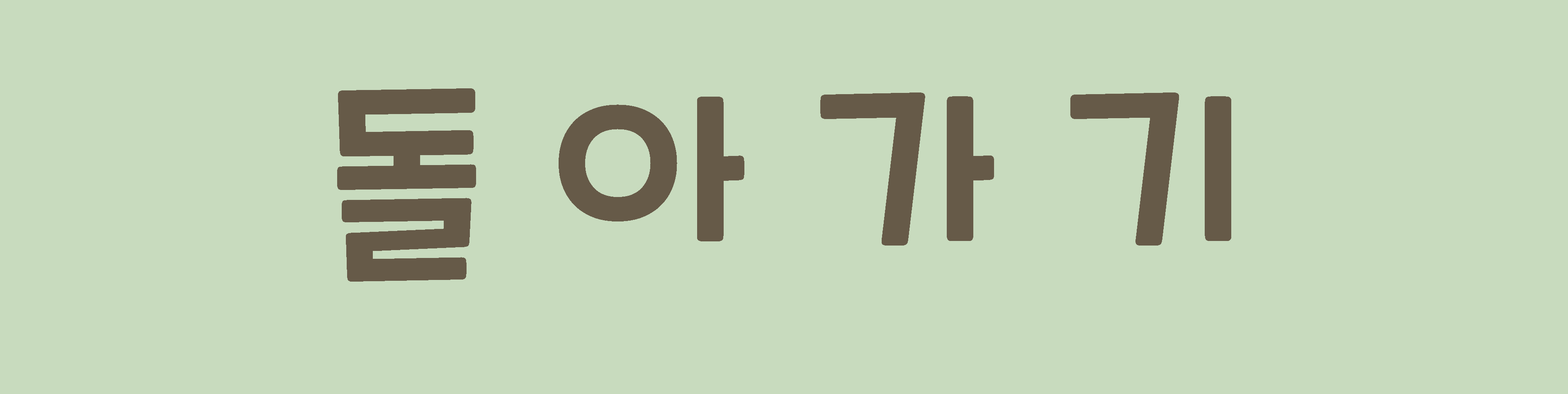
<style>
.page{position:relative;width:1568px;height:394px;background:#c8dbbe}
.page>*{position:absolute;margin:0}
.t1{font:207.4px "CookieRun-Regular";color:#665a48}
</style>
<div class="page">
<p class="t1" style="left:337px;top:88px;width:894px;height:194px">돌 아 가 기</p>
</div>
